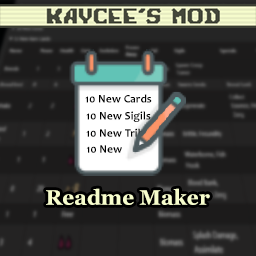
<style>
.page{position:relative;width:256px;height:256px}
.page>*{position:absolute;margin:0}
.t1{font:11.6px "Candara-Bold";color:#000000}
.t2{font:21px "Georgia-Bold";color:#f7fdcd}
</style>
<div class="page">
<p class="t1" style="left:85px;top:94px;width:67px;height:9px">10 New Cards</p>
<p class="t1" style="left:86px;top:111px;width:65px;height:11px">10 New Sigils</p>
<p class="t1" style="left:86px;top:128px;width:69px;height:9px">10 New Tribes</p>
<p class="t1" style="left:86px;top:145px;width:36px;height:8px">10 New</p>
<p class="t2" style="left:46px;top:188px;width:164px;height:17px">Readme Maker</p>
</div>
